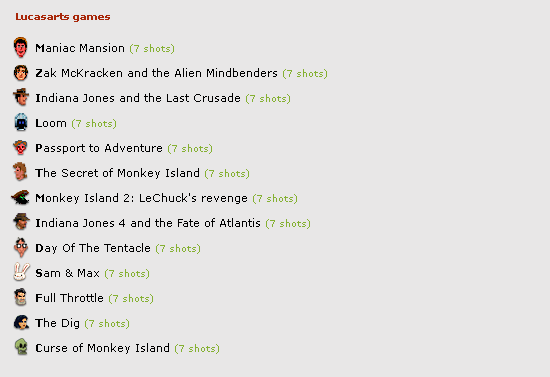
<style>
.page{position:relative;width:550px;height:377px;background:#e8e7e7}
.page>*{position:absolute;margin:0}
.t1{font:11px/25px "Verdana";color:#000000}
.t2{font:10px/20px "Verdana-Bold";color:#a82709}
.t3{font:11px/25px "Verdana-Bold";color:#000000}
.t4{font:9px/25px "Verdana";color:#85b132}
</style>
<div class="page">
<p class="t1" style="left:16px;top:13px;width:311px;height:341px"><span class="t2">Lucasarts games<br>     </span><span class="t3">M</span>aniac Mansion <span class="t4">(7 shots)  <br>     </span><span class="t3">Z</span>ak McKracken and the Alien Mindbenders <span class="t4">(7 shots)  <br>     </span><span class="t3">I</span>ndiana Jones and the Last Crusade <span class="t4">(7 shots)  <br>     </span><span class="t3">L</span>oom <span class="t4">(7 shots)<br>     </span><span class="t3">P</span>assport to Adventure <span class="t4">(7 shots) <br>     </span><span class="t3">T</span>he Secret of Monkey Island <span class="t4">(7 shots)  <br>     </span><span class="t3">M</span>onkey Island 2: LeChuck's revenge <span class="t4">(7 shots)  <br>     </span><span class="t3">I</span>ndiana Jones 4 and the Fate of Atlantis <span class="t4">(7 shots)<br>     </span><span class="t3">D</span>ay Of The Tentacle <span class="t4">(7 shots) <br>     </span><span class="t3">S</span>am &amp; Max <span class="t4">(7 shots)<br>     </span><span class="t3">F</span>ull Throttle <span class="t4">(7 shots) <br>     </span><span class="t3">T</span>he Dig <span class="t4">(7 shots) <br>     </span><span class="t3">C</span>urse of Monkey Island <span class="t4">(7 shots)</span></p>
</div>
